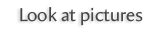
<style>
.page{position:relative;width:164px;height:32px;background:#ffffff}
.page>*{position:absolute;margin:0}
.t1{font:18.7px "Amira-Roman";color:#474747}
</style>
<div class="page">
<p class="t1" style="left:20px;top:7px;width:123px;height:19px">Look at pictures</p>
</div>
